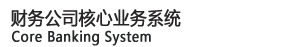
<style>
.page{position:relative;width:300px;height:47px;background:#ffffff}
.page>*{position:absolute;margin:0}
.t1{font:18px "MicrosoftYaHei";letter-spacing:0.025em;color:#272626;font-weight:bold;scale:0.9 1}
.t2{font:14px "MicrosoftYaHei";letter-spacing:0.025em;color:#27282a;font-weight:bold;scale:0.9 1}
</style>
<div class="page">
<p class="t1" style="left:11px;top:9px;width:170px;height:18px">财务公司核心业务系统</p>
<p class="t2" style="left:12px;top:30px;width:139px;height:16px">Core Banking System</p>
</div>
